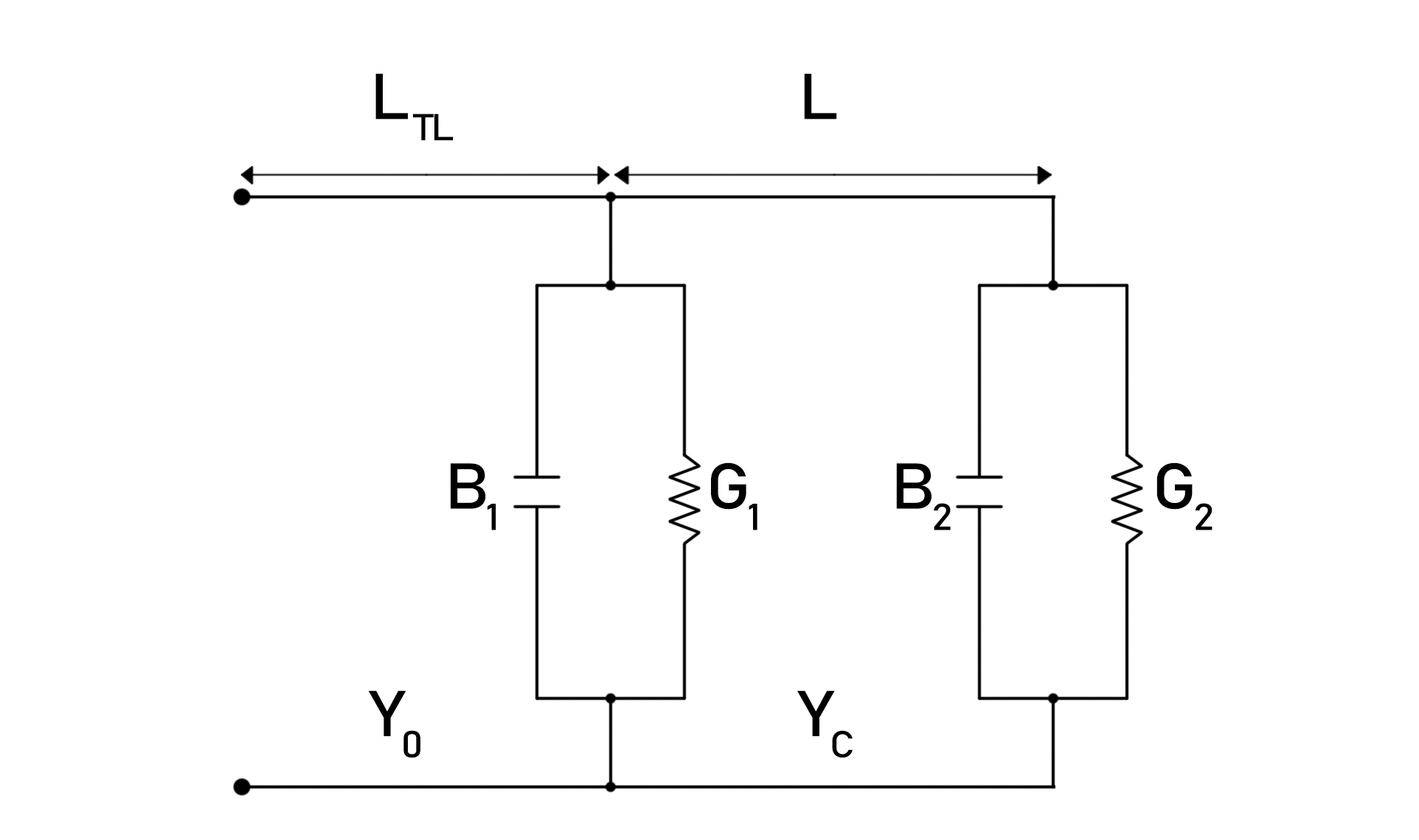
<style>
.page{position:relative;width:1419px;height:840px;background:#ffffff}
.page>*{position:absolute;margin:0}
.t1{font:63.9px "Bahnschrift";letter-spacing:-0.06em;color:#000000;font-weight:bold;font-style:italic;scale:1.1 1}
</style>
<div class="page">
<p class="t1" style="left:375px;top:74px;width:79px;height:67px">L TL</p>
<p class="t1" style="left:804px;top:74px;width:33px;height:45px">L</p>
<p class="t1" style="left:451px;top:463px;width:45px;height:67px">B1</p>
<p class="t1" style="left:711px;top:463px;width:47px;height:67px">G1</p>
<p class="t1" style="left:896px;top:463px;width:55px;height:67px">B2</p>
<p class="t1" style="left:1157px;top:463px;width:56px;height:67px">G2</p>
<p class="t1" style="left:368px;top:690px;width:52px;height:68px">Y0</p>
<p class="t1" style="left:797px;top:690px;width:56px;height:68px">YC</p>
</div>
